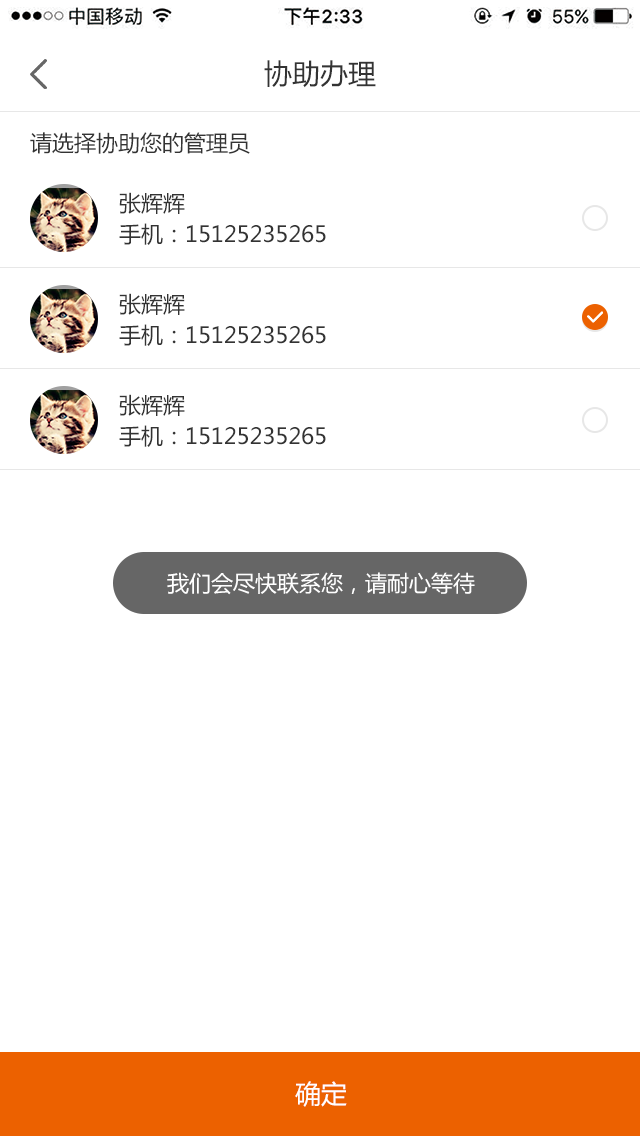
<style>
.page{position:relative;width:640px;height:1136px;background:#ffffff}
.page>*{position:absolute;margin:0}
.t1{font:28px "MicrosoftYaHei";color:#333333}
.t2{font:22px "MicrosoftYaHei";color:#333333}
.t3{font:22px "MicrosoftYaHei";color:#ffffff}
.t4{font:26px "MicrosoftYaHei";color:#ffffff}
</style>
<div class="page">
<p class="t1" style="left:264px;top:60px;width:112px;height:28px">协助办理</p>
<p class="t2" style="left:30px;top:132px;width:220px;height:22px">请选择协助您的管理员</p>
<p class="t2" style="left:119px;top:192px;width:66px;height:22px">张辉辉</p>
<p class="t2" style="left:119px;top:223px;width:207px;height:22px">手机：15125235265</p>
<p class="t2" style="left:119px;top:293px;width:66px;height:22px">张辉辉</p>
<p class="t2" style="left:119px;top:324px;width:207px;height:22px">手机：15125235265</p>
<p class="t2" style="left:119px;top:394px;width:66px;height:22px">张辉辉</p>
<p class="t2" style="left:119px;top:425px;width:207px;height:22px">手机：15125235265</p>
<p class="t3" style="left:167px;top:572px;width:308px;height:23px">我们会尽快联系您，请耐心等待</p>
<p class="t4" style="left:295px;top:1081px;width:52px;height:26px">确定</p>
</div>
